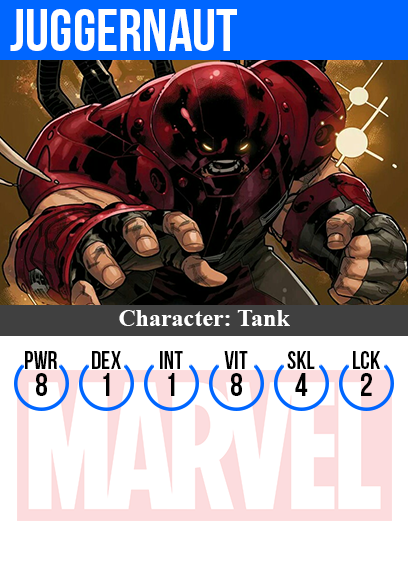
<style>
.page{position:relative;width:408px;height:585px;background:#ffffff}
.page>*{position:absolute;margin:0}
.t1{font:60px "BebasNeue";color:#ffffff}
.t2{font:24px "TimesNewRomanPS-BoldMT";color:#ffffff}
.t3{font:25px "BebasNeue";color:#000000}
.t4{font:32px "BebasNeue";color:#000000}
</style>
<div class="page">
<p class="t1" style="left:10px;top:9px;width:227px;height:42px">juggernaut</p>
<p class="t2" style="left:119px;top:310px;width:171px;height:16px">Character: Tank</p>
<p class="t3" style="left:25px;top:351px;width:32px;height:18px">PWR</p>
<p class="t3" style="left:92px;top:351px;width:29px;height:18px">dex</p>
<p class="t3" style="left:160px;top:351px;width:23px;height:18px">int</p>
<p class="t3" style="left:224px;top:351px;width:24px;height:18px">vit</p>
<p class="t3" style="left:287px;top:351px;width:28px;height:18px">skl</p>
<p class="t3" style="left:353px;top:351px;width:27px;height:18px">lck</p>
<p class="t4" style="left:36px;top:373px;width:11px;height:23px">8</p>
<p class="t4" style="left:103px;top:373px;width:7px;height:23px">1</p>
<p class="t4" style="left:168px;top:373px;width:7px;height:23px">1</p>
<p class="t4" style="left:231px;top:373px;width:11px;height:23px">8</p>
<p class="t4" style="left:295px;top:373px;width:13px;height:23px">4</p>
<p class="t4" style="left:361px;top:373px;width:11px;height:23px">2</p>
</div>
